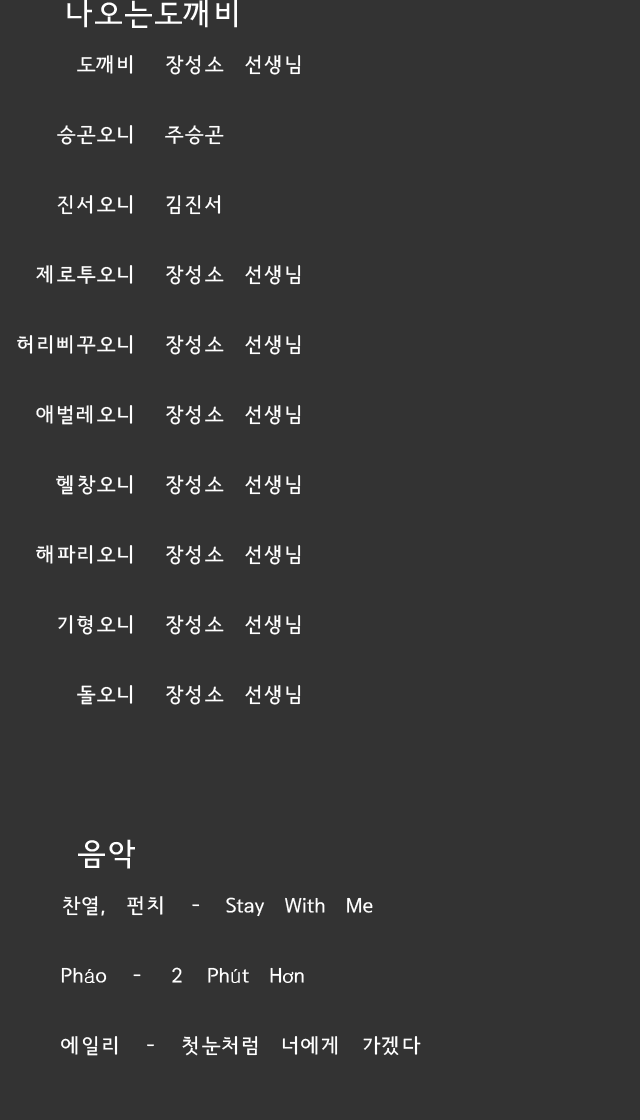
<style>
.page{position:relative;width:640px;height:1120px;background:#333333}
.page>*{position:absolute;margin:0}
.t1{font:30px "SeoulNamsanvert";color:#ffffff}
.t2{font:20px "SeoulNamsanvert";color:#ffffff}
.t3{font:20px "Gulim";color:#ffffff}
.t4{font:20px "MyriadPro-Regular";color:#ffffff}
</style>
<div class="page">
<p class="t1" style="left:67px;top:0px;width:170px;height:28px">나오는도깨비</p>
<p class="t2" style="left:17px;top:55px;width:116px;height:650px;text-align:right">도깨비<br><br>승곤오니<br><br>진서오니<br><br>제로투오니<br><br>허리삐꾸오니<br><br>애벌레오니<br><br>헬창오니<br><br>해파리오니<br><br>기형오니<br><br>돌오니</p>
<p class="t2" style="left:165px;top:55px;width:136px;height:650px">장성소 선생님<br><br>주승곤<br><br>김진서<br><br>장성소 선생님<br><br>장성소 선생님<br><br>장성소 선생님<br><br>장성소 선생님<br><br>장성소 선생님<br><br>장성소 선생님<br><br>장성소 선생님</p>
<p class="t1" style="left:78px;top:839px;width:57px;height:30px">음악</p>
<p class="t2" style="left:61px;top:896px;width:360px;height:160px">찬열, 펀치 - Stay With Me<br><br>Ph<span class="t3">á</span>o - 2 Ph<span class="t3">ú</span>t H<span class="t4">ơ</span>n<br><br>에일리 - 첫눈처럼 너에게 가겠다</p>
</div>
